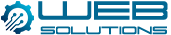
<style>
.page{position:relative;width:171px;height:35px;background:#ffffff}
.page>*{position:absolute;margin:0}
.t1{font:12px "SK-Porsche";color:#016792}
.t2{font:30px "SK-Porsche";color:#016792}
</style>
<div class="page">
<p class="t1" style="left:38px;top:1px;width:130px;height:34px;text-align:center"><span class="t2">Web<br></span>solutions</p>
</div>
